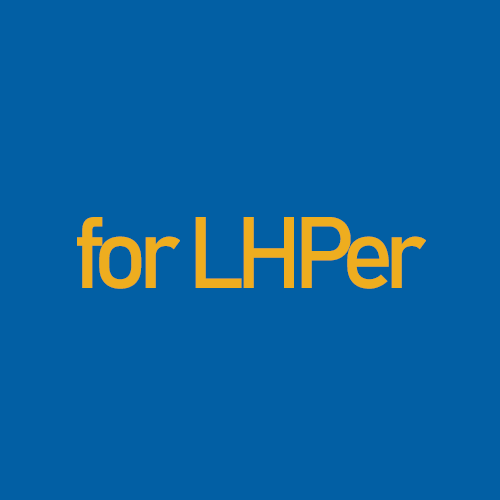
<style>
.page{position:relative;width:500px;height:500px;background:#025fa4}
.page>*{position:absolute;margin:0}
.t1{font:100px "Bahnschrift";letter-spacing:-0.1em;color:#eead1f}
</style>
<div class="page">
<p class="t1" style="left:77px;top:217px;width:349px;height:72px">for LHPer</p>
</div>
